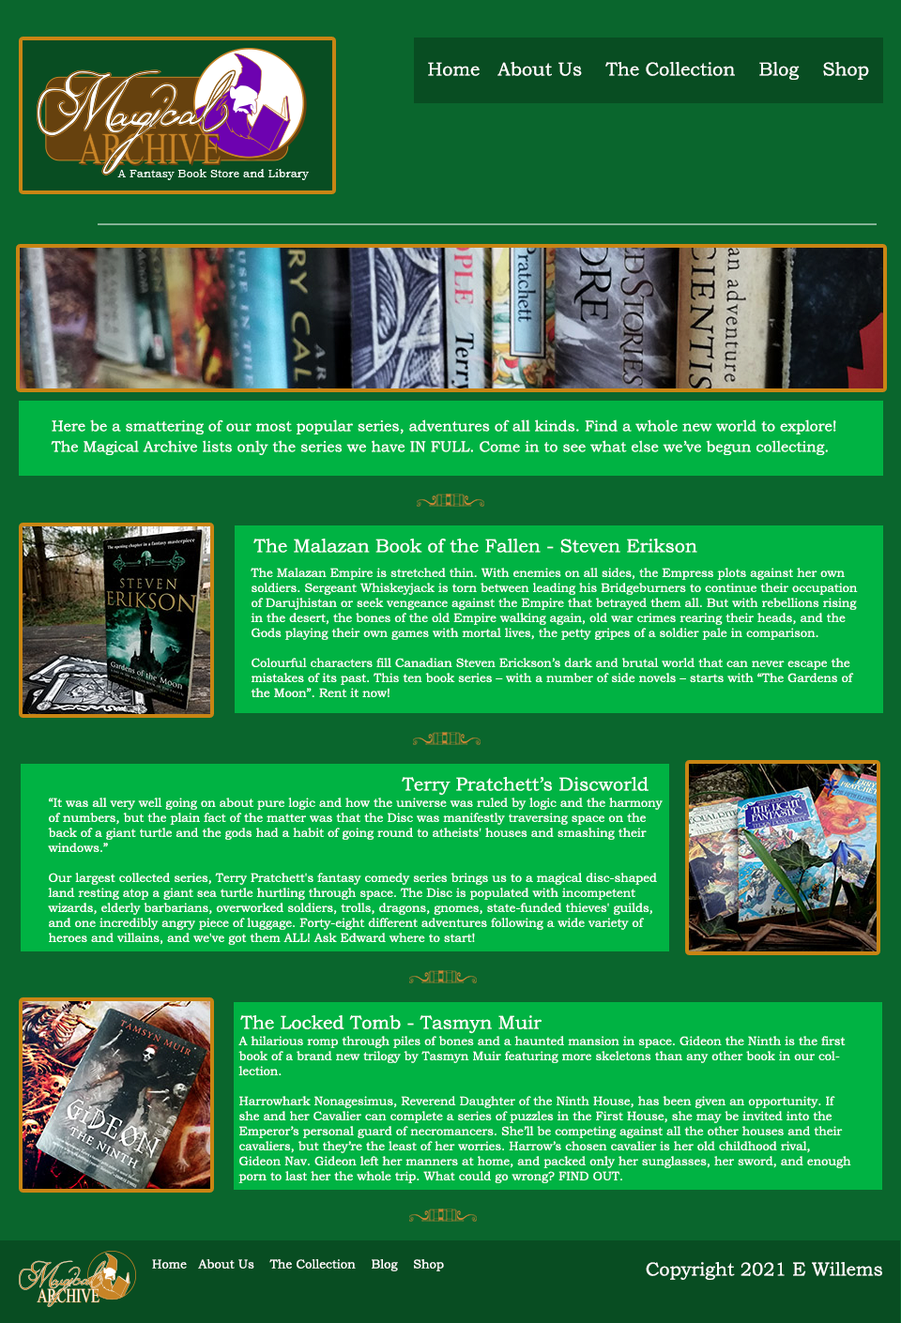
<style>
.page{position:relative;width:901px;height:1323px;background:#0a662d}
.page>*{position:absolute;margin:0}
.t1{font:18.8px "BookmanOldStyle";color:#ffffff}
.t2{font:15px/20.6px "BookmanOldStyle";color:#ffffff}
.t3{font:12.2px/15px "BookmanOldStyle";color:#ffffff}
.t4{font:12.4px "BookmanOldStyle";color:#ffffff}
</style>
<div class="page">
<p class="t1" style="left:428px;top:62px;width:441px;height:18px">Home   About Us    The Collection    Blog    Shop</p>
<p class="t2" style="left:51px;top:420px;width:785px;height:35px">Here be a smattering of our most popular series, adventures of all kinds. Find a whole new world to explore! <br>The Magical Archive lists only the series we have IN FULL. Come in to see what else we’ve begun collecting.</p>
<p class="t1" style="left:253px;top:539px;width:444px;height:14px">The Malazan Book of the Fallen - Steven Erikson</p>
<p class="t3" style="left:251px;top:568px;width:607px;height:129px">The Malazan Empire is stretched thin. With enemies on all sides, the Empress plots against her own soldiers. Sergeant Whiskeyjack is torn between leading his Bridgeburners to continue their occupation of Darujhistan or seek vengeance against the Empire that betrayed them all. But with rebellions rising in the desert, the bones of the old Empire walking again, old war crimes rearing their heads, and the Gods playing their own games with mortal lives, the petty gripes of a soldier pale in comparison.<br><br>Colourful characters fill Canadian Steven Erickson’s dark and brutal world that can never escape the mistakes of its past. This ten book series – with a number of side novels – starts with “The Gardens of the Moon”. Rent it now!</p>
<p class="t1" style="left:402px;top:777px;width:247px;height:19px">Terry Pratchett’s Discworld</p>
<p class="t3" style="left:48px;top:798px;width:615px;height:147px">“It was all very well going on about pure logic and how the universe was ruled by logic and the harmony of numbers, but the plain fact of the matter was that the Disc was manifestly traversing space on the back of a giant turtle and the gods had a habit of going round to atheists' houses and smashing their windows.”<br><br>Our largest collected series, Terry Pratchett's fantasy comedy series brings us to a magical disc-shaped land resting atop a giant sea turtle hurtling through space. The Disc is populated with incompetent wizards, elderly barbarians, overworked soldiers, trolls, dragons, gnomes, state-funded thieves' guilds, and one incredibly angry piece of luggage. Forty-eight different adventures following a wide variety of heroes and villains, and we've got them ALL! Ask Edward where to start!</p>
<p class="t1" style="left:240px;top:1016px;width:302px;height:18px">The Locked Tomb - Tasmyn Muir</p>
<p class="t3" style="left:238px;top:1036px;width:613px;height:148px">A hilarious romp through piles of bones and a haunted mansion in space. Gideon the Ninth is the first book of a brand new trilogy by Tasmyn Muir featuring more skeletons than any other book in our collection.<br><br>Harrowhark Nonagesimus, Reverend Daughter of the Ninth House, has been given an opportunity. If she and her Cavalier can complete a series of puzzles in the First House, she may be invited into the Emperor’s personal guard of necromancers. She’ll be competing against all the other houses and their cavaliers, but they’re the least of her worries. Harrow’s chosen cavalier is her old childhood rival, Gideon Nav. Gideon left her manners at home, and packed only her sunglasses, her sword, and enough porn to last her the whole trip. What could go wrong? FIND OUT.</p>
<p class="t4" style="left:152px;top:1260px;width:292px;height:12px">Home   About Us    The Collection    Blog    Shop</p>
<p class="t1" style="left:646px;top:1262px;width:236px;height:18px">Copyright 2021 E Willems</p>
</div>
